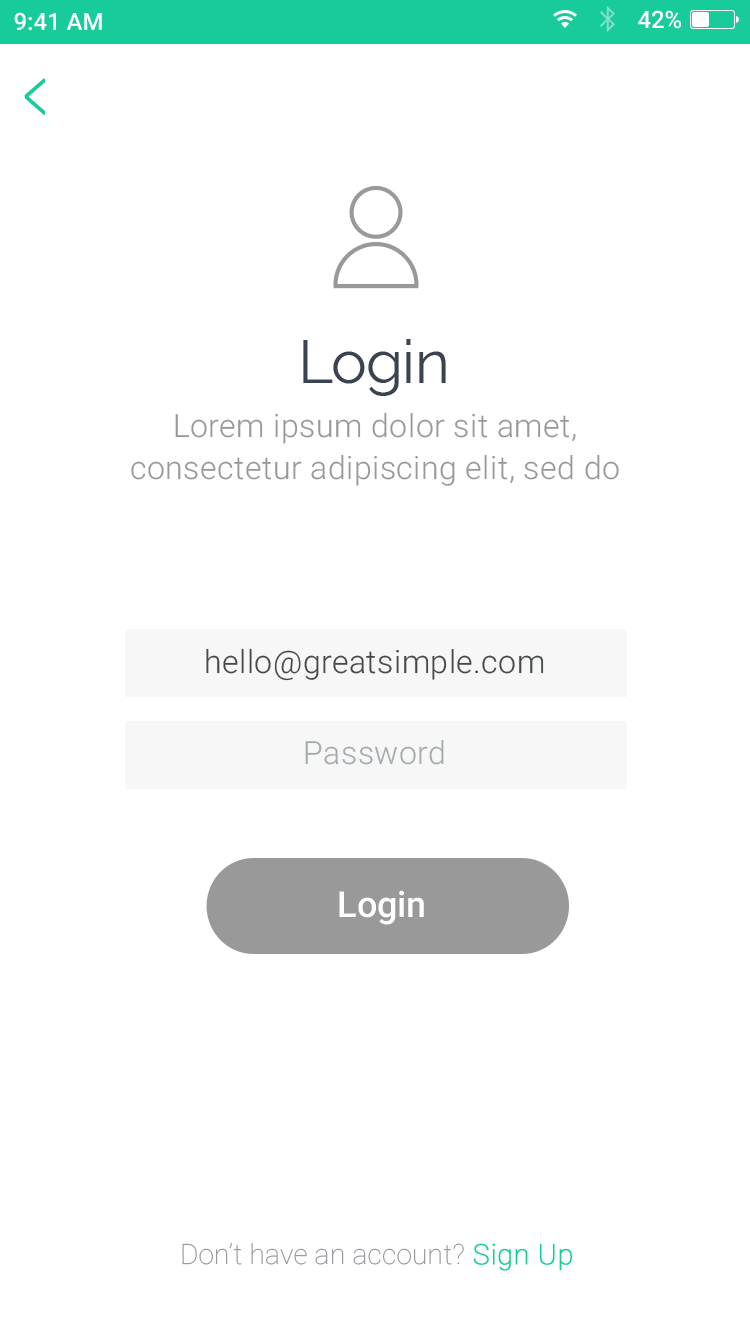
<style>
.page{position:relative;width:750px;height:1334px;background:#ffffff}
.page>*{position:absolute;margin:0}
.t1{font:24px "Roboto-Medium";color:#ffffff}
.t2{font:89.3px "Roboto-Thin";letter-spacing:0.01em;color:#18cb9b;font-weight:bold;scale:0.52 1}
.t3{font:60px "Raleway";letter-spacing:-0.01em;color:#3c4350}
.t4{font:32px/42px "Roboto-Light";letter-spacing:0.015em;color:#96999a}
.t5{font:32px "Roboto-Light";letter-spacing:0.015em;color:#474a4c}
.t6{font:32px "Roboto-Light";letter-spacing:0.015em;color:#a4abae}
.t7{font:36px "Roboto-Medium";letter-spacing:-0.005em;color:#ffffff}
.t8{font:28px "Roboto-Thin";letter-spacing:0.01em;color:#919499}
.t9{font:28px "Roboto-Thin";letter-spacing:0.01em;color:#18cb9b;font-weight:bold}
</style>
<div class="page">
<p class="t1" style="left:14px;top:12px;width:88px;height:19px">9:41 AM</p>
<p class="t1" style="left:638px;top:10px;width:43px;height:19px">42%</p>
<p class="t2" style="left:24px;top:78px;width:21px;height:37px">&lt;</p>
<p class="t3" style="left:303px;top:339px;width:143px;height:57px">Login</p>
<p class="t4" style="left:131px;top:412px;width:488px;height:74px;text-align:center">Lorem ipsum dolor sit amet, consectetur adipiscing elit, sed do</p>
<p class="t5" style="left:206px;top:648px;width:338px;height:33px">hello@greatsimple.com</p>
<p class="t6" style="left:305px;top:739px;width:139px;height:26px">Password</p>
<p class="t7" style="left:339px;top:890px;width:85px;height:35px">Login</p>
<p class="t8" style="left:182px;top:1242px;width:391px;height:29px">Don’t have an account? <span class="t9">Sign Up</span></p>
</div>
